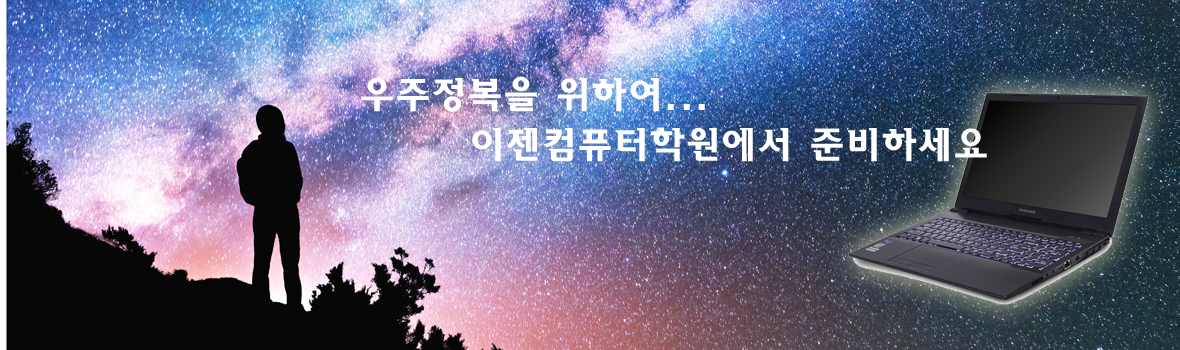
<style>
.page{position:relative;width:1180px;height:350px}
.page>*{position:absolute;margin:0}
.t1{font:36px "HaanSomangB";color:#ffffff}
</style>
<div class="page">
<p class="t1" style="left:361px;top:76px;width:344px;height:36px">우주정복을 위하여...</p>
<p class="t1" style="left:472px;top:127px;width:515px;height:35px">이젠컴퓨터학원에서 준비하세요</p>
</div>
